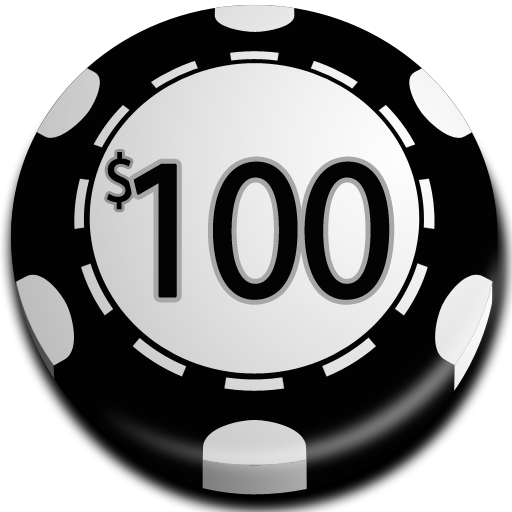
<style>
.page{position:relative;width:512px;height:512px;background:#020202}
.page>*{position:absolute;margin:0}
.t1{font:117.9px "MyriadPro-Regular";letter-spacing:-0.05em;color:#020202;font-variant:small-caps;font-weight:bold;scale:0.92 1}
.t2{font:346.9px "MyriadPro-Regular";letter-spacing:-0.05em;color:#030303;font-variant:small-caps;font-weight:bold;scale:0.92 1}
</style>
<div class="page">
<p class="t1" style="left:107px;top:152px;width:25px;height:58px">$</p>
<p class="t2" style="left:133px;top:161px;width:257px;height:139px">100</p>
</div>
